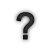
<style>
.page{position:relative;width:50px;height:50px;background:#ffffff}
.page>*{position:absolute;margin:0}
.t1{font:36px "ArialMT";color:#282828;font-weight:bold}
</style>
<div class="page">
<p class="t1" style="left:16px;top:12px;width:19px;height:28px">?</p>
</div>
